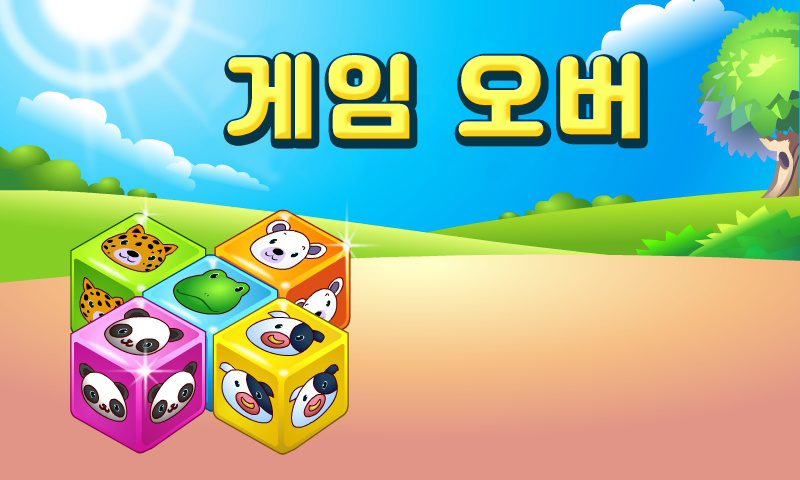
<style>
.page{position:relative;width:800px;height:480px}
.page>*{position:absolute;margin:0}
.t1{font:90px "Jalnan";letter-spacing:0.1em;color:#fbff65}
</style>
<div class="page">
<p class="t1" style="left:227px;top:53px;width:183px;height:86px">게임</p>
<p class="t1" style="left:458px;top:53px;width:182px;height:86px">오버</p>
</div>
